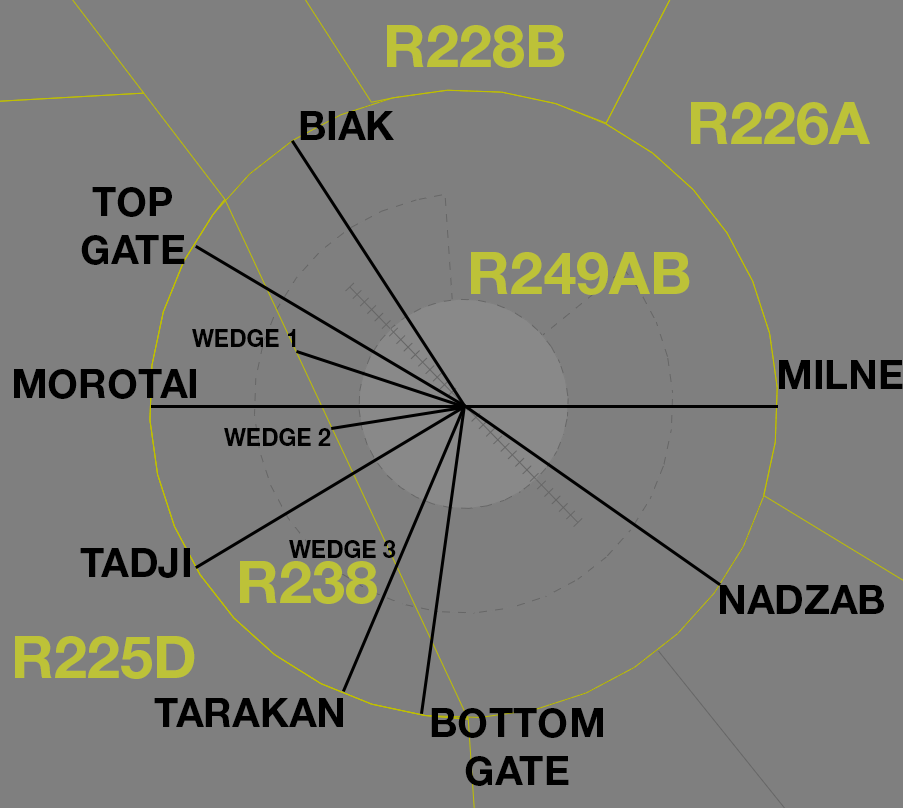
<style>
.page{position:relative;width:903px;height:808px;background:#7f7f7f}
.page>*{position:absolute;margin:0}
.t1{font:59.2px "HelveticaNeueLTStd-Bd";color:#bdc238}
.t2{font:40px "HelveticaNeueLTStd-Bd";color:#000000}
.t3{font:23.9px "HelveticaNeueLTStd-Bd";color:#000000}
</style>
<div class="page">
<p class="t1" style="left:387px;top:25px;width:178px;height:43px">R228B</p>
<p class="t1" style="left:691px;top:102px;width:179px;height:43px">R226A</p>
<p class="t2" style="left:300px;top:111px;width:94px;height:29px">BIAK</p>
<p class="t2" style="left:81px;top:187px;width:104px;height:78px;text-align:center">TOP<br>GATE</p>
<p class="t1" style="left:471px;top:252px;width:219px;height:43px">R249AB</p>
<p class="t3" style="left:192px;top:329px;width:104px;height:18px">WEDGE 1</p>
<p class="t2" style="left:779px;top:360px;width:124px;height:29px">MILNE</p>
<p class="t2" style="left:14px;top:369px;width:182px;height:30px">MOROTAI</p>
<p class="t3" style="left:224px;top:428px;width:107px;height:18px">WEDGE 2</p>
<p class="t3" style="left:289px;top:540px;width:107px;height:18px">WEDGE 3</p>
<p class="t2" style="left:80px;top:548px;width:110px;height:30px">TADJI</p>
<p class="t1" style="left:240px;top:561px;width:137px;height:43px">R238</p>
<p class="t2" style="left:720px;top:585px;width:164px;height:29px">NADZAB</p>
<p class="t1" style="left:15px;top:636px;width:180px;height:43px">R225D</p>
<p class="t2" style="left:154px;top:698px;width:189px;height:29px">TARAKAN</p>
<p class="t2" style="left:431px;top:708px;width:172px;height:78px;text-align:center">BOTTOM<br>GATE</p>
</div>
